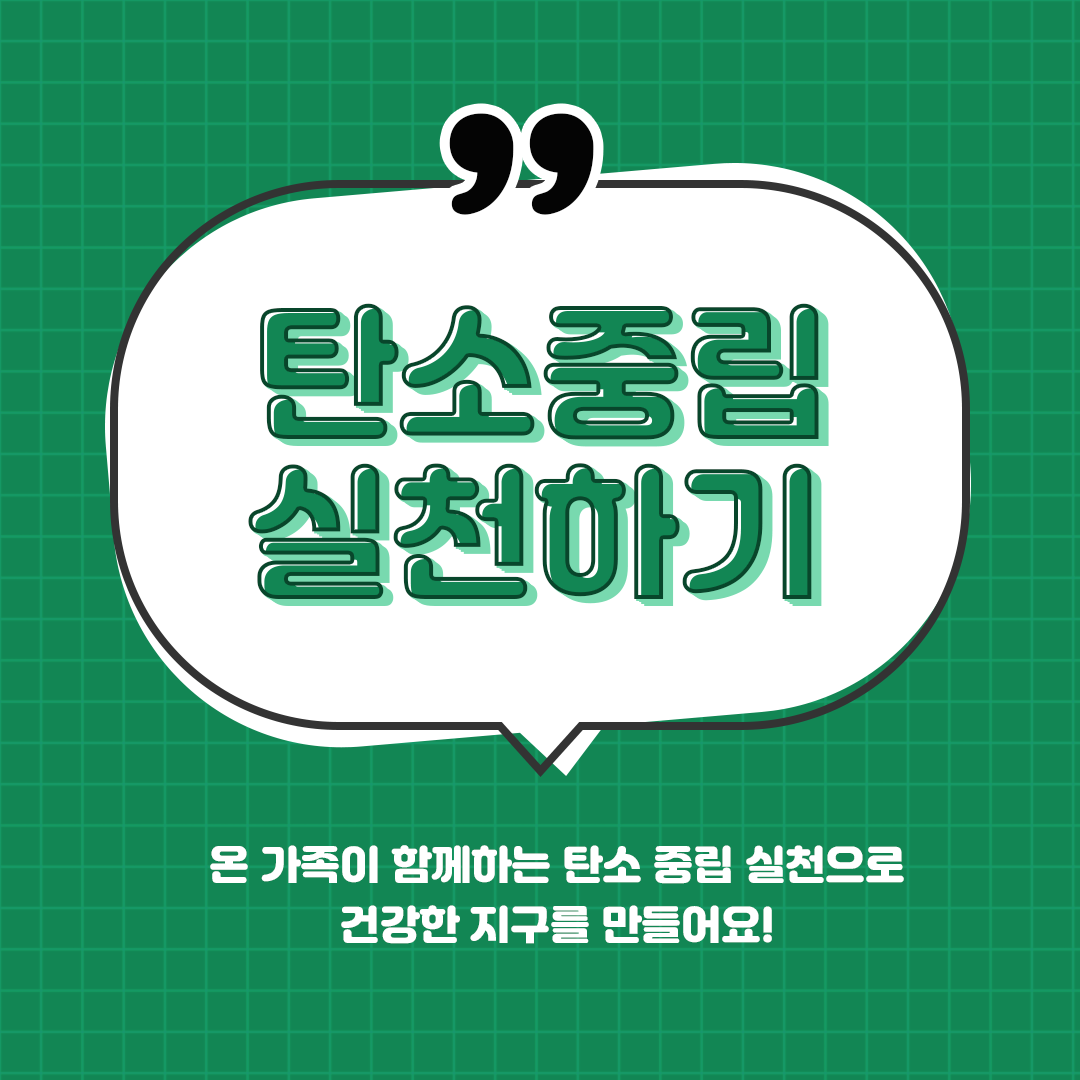
<style>
.page{position:relative;width:1080px;height:1080px;background:#128654}
.page>*{position:absolute;margin:0}
.t1{font:300px "Jalnan2TTF";color:#040404}
.t2{font:144px/160px "Jalnan2TTF"}
.t3{font:40px/60px "Jalnan2TTF";color:#ffffff}
</style>
<div class="page">
<p class="t1" style="left:449px;top:113px;width:145px;height:102px">”</p>
<p class="t2" style="left:248px;top:303px;width:571px;height:296px;text-align:center">탄소중립<br>실천하기</p>
<p class="t3" style="left:210px;top:845px;width:694px;height:99px;text-align:center">온 가족이 함께하는 탄소 중립 실천으로<br>건강한 지구를 만들어요!</p>
</div>
